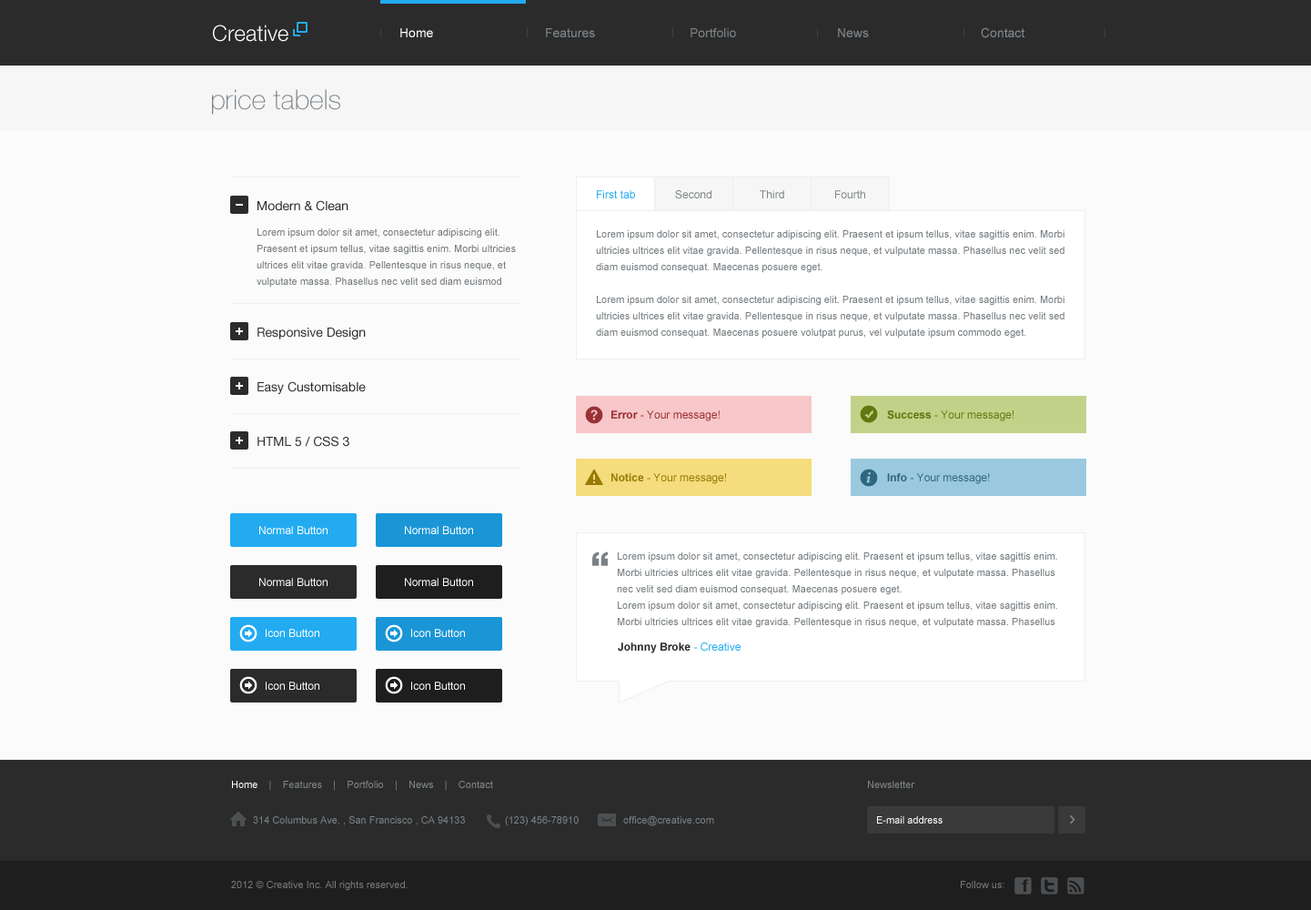
<style>
.page{position:relative;width:1311px;height:910px;background:#fbfbfb}
.page>*{position:absolute;margin:0}
.t1{font:21.8px "HelveticaNeueLTStd-Lt";color:#ffffff}
.t2{font:9.5px "HelveticaNeueLTStd-Lt";scale:1.35 1}
.t3{font:12.7px "ArialMT";color:#ffffff}
.t4{font:12.7px "ArialMT";color:#80878c}
.t5{font:12.7px "ArialMT";color:#7a8186}
.t6{font:27.3px "HelveticaNeueLTStd-Th";color:#7a8186}
.t7{font:10.9px "ArialMT";color:#23abf1}
.t8{font:10.9px "ArialMT";color:#7e8487}
.t9{font:12.7px "HelveticaNeueLTStd-Roman";color:#2b2b2b}
.t10{font:10px/16.4px "ArialMT";color:#757b7f}
.t11{font:10.9px "ArialMT";color:#983135}
.t12{font:10.9px "Arial-BoldMT";color:#983135}
.t13{font:10.9px "ArialMT";color:#617711}
.t14{font:10.9px "Arial-BoldMT";color:#617711}
.t15{font:10.9px "ArialMT";color:#997a04}
.t16{font:10.9px "Arial-BoldMT";color:#997a04}
.t17{font:10.9px "ArialMT";color:#2f6680}
.t18{font:10.9px "Arial-BoldMT";color:#2f6680}
.t19{font:10.9px "ArialMT";color:#ffffff}
.t20{font:36.4px "HelveticaNeueLTStd-Blk";color:#7a8186}
.t21{font:10.9px "Arial-BoldMT";color:#2b2b2b}
.t22{font:10px "ArialMT";color:#80878c}
.t23{font:10px "ArialMT";color:#ffffff}
.t24{font:10px "ArialMT";color:#7a8186}
.t25{font:10px "ArialMT";color:#797979}
</style>
<div class="page">
<p class="t1" style="left:213px;top:25px;width:75px;height:17px">Creative</p>
<p class="t2" style="left:380px;top:27px;width:1px;height:11px">|</p>
<p class="t3" style="left:400px;top:28px;width:33px;height:9px">Home</p>
<p class="t2" style="left:527px;top:27px;width:1px;height:11px">|</p>
<p class="t4" style="left:546px;top:28px;width:49px;height:9px">Features</p>
<p class="t2" style="left:672px;top:27px;width:1px;height:11px">|</p>
<p class="t5" style="left:690px;top:28px;width:46px;height:9px">Portfolio</p>
<p class="t2" style="left:817px;top:27px;width:1px;height:11px">|</p>
<p class="t4" style="left:838px;top:28px;width:31px;height:9px">News</p>
<p class="t2" style="left:963px;top:27px;width:1px;height:11px">|</p>
<p class="t4" style="left:981px;top:27px;width:44px;height:11px">Contact</p>
<p class="t2" style="left:1104px;top:27px;width:1px;height:11px">|</p>
<p class="t6" style="left:212px;top:89px;width:128px;height:26px">price tabels</p>
<p class="t7" style="left:597px;top:190px;width:38px;height:8px">First tab</p>
<p class="t8" style="left:675px;top:190px;width:36px;height:9px">Second</p>
<p class="t8" style="left:760px;top:190px;width:24px;height:8px">Third</p>
<p class="t8" style="left:835px;top:190px;width:30px;height:8px">Fourth</p>
<p class="t9" style="left:257px;top:200px;width:91px;height:11px">Modern &amp; Clean</p>
<p class="t10" style="left:257px;top:228px;width:259px;height:59px">Lorem ipsum dolor sit amet, consectetur adipiscing elit. Praesent et ipsum tellus, vitae sagittis enim. Morbi ultricies ultrices elit vitae gravida. Pellentesque in risus neque, et vulputate massa. Phasellus nec velit sed diam euismod consequat. Maecenas posuere volutpat purus, vel vulputate ipsum commodo eget.</p>
<p class="t10" style="left:596px;top:230px;width:468px;height:108px">Lorem ipsum dolor sit amet, consectetur adipiscing elit. Praesent et ipsum tellus, vitae sagittis enim. Morbi ultricies ultrices elit vitae gravida. Pellentesque in risus neque, et vulputate massa. Phasellus nec velit sed diam euismod consequat. Maecenas posuere eget.<br><br>Lorem ipsum dolor sit amet, consectetur adipiscing elit. Praesent et ipsum tellus, vitae sagittis enim. Morbi ultricies ultrices elit vitae gravida. Pellentesque in risus neque, et vulputate massa. Phasellus nec velit sed diam euismod consequat. Maecenas posuere volutpat purus, vel vulputate ipsum commodo eget.</p>
<p class="t9" style="left:257px;top:327px;width:109px;height:12px">Responsive Design</p>
<p class="t9" style="left:257px;top:381px;width:109px;height:13px">Easy Customisable</p>
<p class="t11" style="left:611px;top:410px;width:109px;height:11px"><span class="t12">Error</span> - Your message!</p>
<p class="t13" style="left:887px;top:410px;width:126px;height:11px"><span class="t14">Success </span>- Your message!</p>
<p class="t9" style="left:257px;top:436px;width:92px;height:11px">HTML 5 / CSS 3</p>
<p class="t15" style="left:611px;top:473px;width:115px;height:11px"><span class="t16">Notice </span>- Your message!</p>
<p class="t17" style="left:887px;top:473px;width:103px;height:11px"><span class="t18">Info </span>- Your message!</p>
<p class="t19" style="left:259px;top:526px;width:68px;height:8px">Normal Button</p>
<p class="t19" style="left:405px;top:526px;width:68px;height:8px">Normal Button</p>
<p class="t20" style="left:592px;top:551px;width:16px;height:15px">“</p>
<p class="t10" style="left:617px;top:552px;width:440px;height:76px">Lorem ipsum dolor sit amet, consectetur adipiscing elit. Praesent et ipsum tellus, vitae sagittis enim. Morbi ultricies ultrices elit vitae gravida. Pellentesque in risus neque, et vulputate massa. Phasellus nec velit sed diam euismod consequat. Maecenas posuere eget.<br>Lorem ipsum dolor sit amet, consectetur adipiscing elit. Praesent et ipsum tellus, vitae sagittis enim. Morbi ultricies ultrices elit vitae gravida. Pellentesque in risus neque, et vulputate massa. Phasellus nec velit sed diam euismod consequat. Maecenas posuere volutpat purus, vel vulputate ipsum commodo eget.</p>
<p class="t19" style="left:259px;top:578px;width:68px;height:8px">Normal Button</p>
<p class="t19" style="left:405px;top:578px;width:68px;height:8px">Normal Button</p>
<p class="t19" style="left:266px;top:629px;width:53px;height:8px">Icon Button</p>
<p class="t19" style="left:411px;top:629px;width:54px;height:8px">Icon Button</p>
<p class="t21" style="left:618px;top:642px;width:122px;height:11px">Johnny Broke <span class="t7">- Creative</span></p>
<p class="t19" style="left:266px;top:681px;width:53px;height:9px">Icon Button</p>
<p class="t19" style="left:411px;top:681px;width:54px;height:9px">Icon Button</p>
<p class="t22" style="left:232px;top:780px;width:261px;height:11px"><span class="t23">Home   </span> |    Features    |    Portfolio    |    News    |    Contact</p>
<p class="t22" style="left:868px;top:780px;width:47px;height:8px">Newsletter</p>
<p class="t24" style="left:253px;top:816px;width:212px;height:9px">314 Columbus Ave. , San Francisco , CA 94133</p>
<p class="t24" style="left:505px;top:816px;width:74px;height:10px">(123) 456-78910</p>
<p class="t24" style="left:623px;top:816px;width:91px;height:10px">office@creative.com</p>
<p class="t23" style="left:877px;top:816px;width:65px;height:7px">E-mail address</p>
<p class="t25" style="left:231px;top:881px;width:177px;height:10px">2012 © Creative Inc. All rights reserved.</p>
<p class="t25" style="left:961px;top:881px;width:43px;height:7px">Follow us:</p>
</div>
